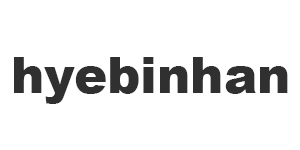
<style>
.page{position:relative;width:300px;height:150px;background:#ffffff}
.page>*{position:absolute;margin:0}
.t1{font:50px "Arial-Black";color:#303030}
</style>
<div class="page">
<p class="t1" style="left:14px;top:57px;width:274px;height:47px">hyebinhan</p>
</div>
